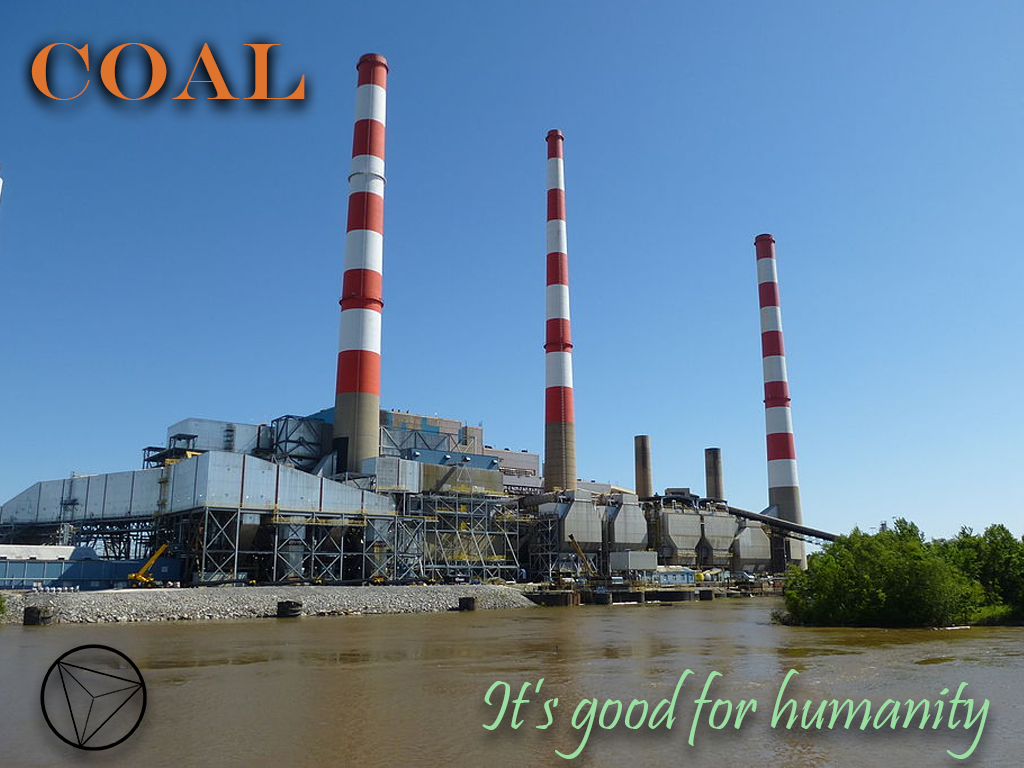
<style>
.page{position:relative;width:1024px;height:768px}
.page>*{position:absolute;margin:0}
.t1{font:80px "EngraversMT";color:#de742d}
.t2{font:72px "Pristina-Regular";color:#9bdea1}
</style>
<div class="page">
<p class="t1" style="left:31px;top:43px;width:274px;height:57px">COAL</p>
<p class="t2" style="left:482px;top:669px;width:508px;height:90px">It’s good for humanity</p>
</div>
